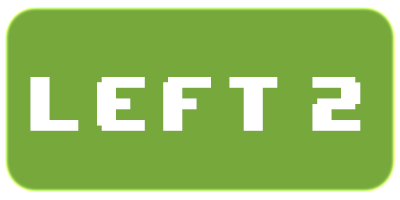
<style>
.page{position:relative;width:400px;height:200px;background:#76a83b}
.page>*{position:absolute;margin:0}
.t1{font:64.3px "8BITWONDERNominal";letter-spacing:0.16em;color:#ffffff;scale:0.89 1}
</style>
<div class="page">
<p class="t1" style="left:30px;top:77px;width:331px;height:54px">left 2</p>
</div>
